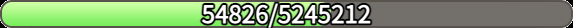
<style>
.page{position:relative;width:573px;height:28px;background:#73706b}
.page>*{position:absolute;margin:0}
.t1{font:24px "WebPSD-18463539-0-Regular";color:#ffffff;font-weight:bold}
</style>
<div class="page">
<p class="t1" style="left:0px;top:0px;width:573px;height:28px">54826/5245212</p>
</div>
